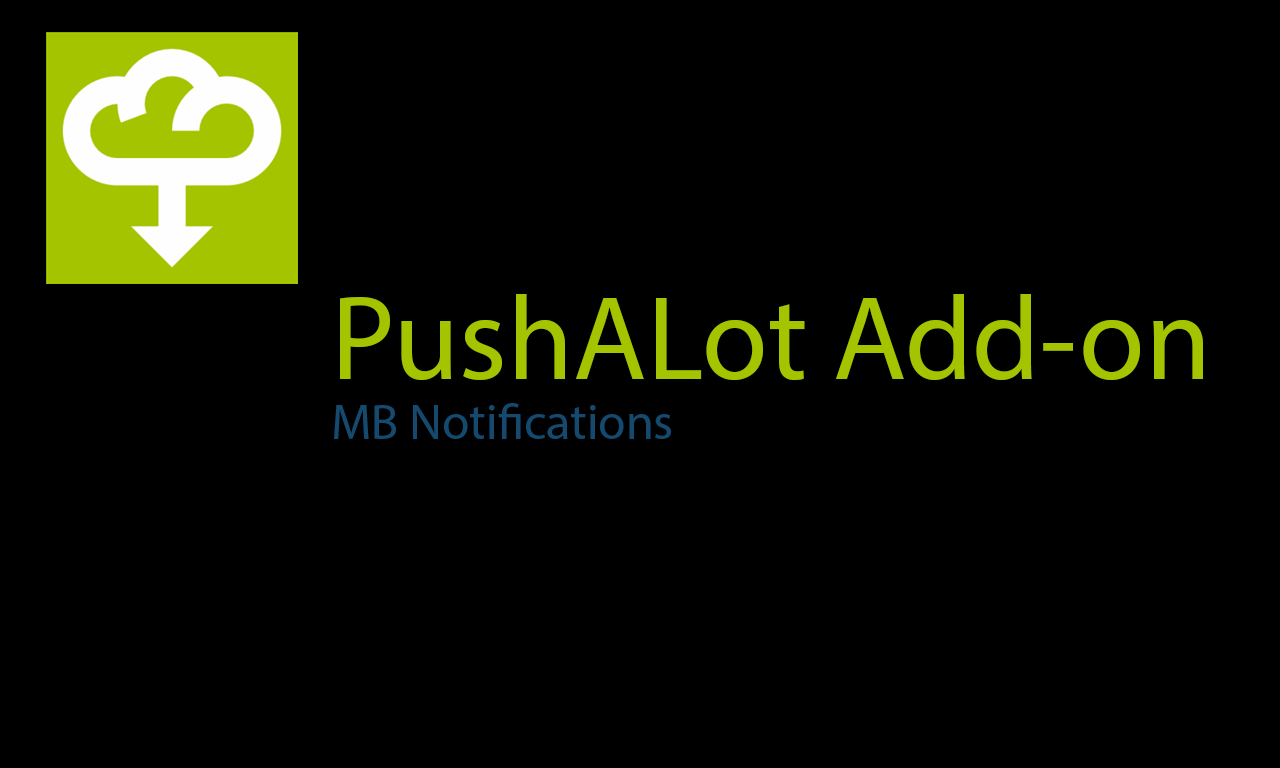
<style>
.page{position:relative;width:1280px;height:768px;background:#000000}
.page>*{position:absolute;margin:0}
.t1{font:50px "MyriadPro-Regular";color:#15496e}
.t2{font:120px "MyriadPro-Regular";color:#a4c400}
</style>
<div class="page">
<p class="t1" style="left:334px;top:294px;width:869px;height:145px"><span class="t2">PushALot Add-on<br></span>MB Notifications</p>
</div>
